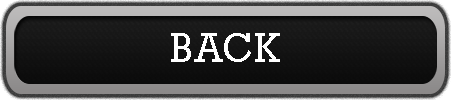
<style>
.page{position:relative;width:451px;height:100px}
.page>*{position:absolute;margin:0}
.t1{font:41.7px "Rockwell";color:#ffffff}
</style>
<div class="page">
<p class="t1" style="left:171px;top:33px;width:109px;height:29px">BACK</p>
</div>
